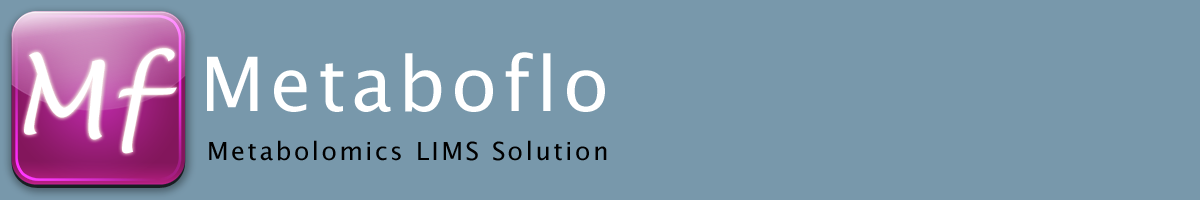
<style>
.page{position:relative;width:1200px;height:200px;background:#7898ab}
.page>*{position:absolute;margin:0}
.t1{font:99px "LucidaHandwriting-Italic";letter-spacing:0.075em;color:#ffffff}
.t2{font:75px "LucidaGrande";letter-spacing:0.075em;color:#ffffff}
.t3{font:25px "LucidaGrande";letter-spacing:0.1em;color:#000000}
</style>
<div class="page">
<p class="t1" style="left:24px;top:48px;width:153px;height:106px">Mf</p>
<p class="t2" style="left:207px;top:52px;width:398px;height:60px">Metaboflo</p>
<p class="t3" style="left:209px;top:140px;width:398px;height:21px">Metabolomics LIMS Solution</p>
</div>
